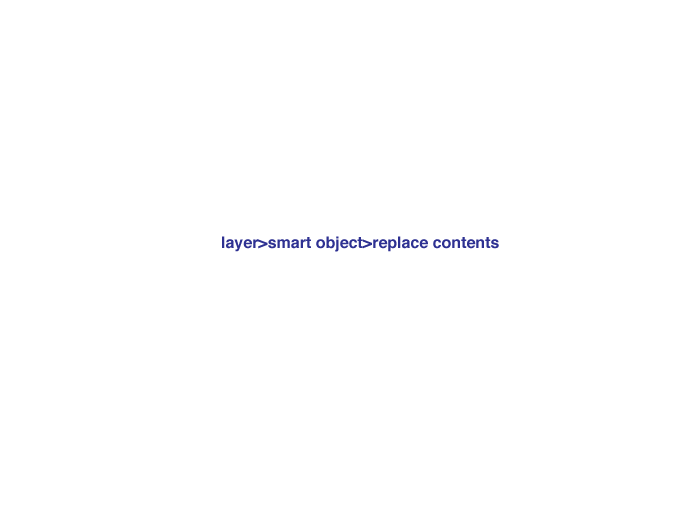
<style>
.page{position:relative;width:700px;height:525px;background:#ffffff}
.page>*{position:absolute;margin:0}
.t1{font:16px "Helvetica-Bold";color:#2e3192}
</style>
<div class="page">
<p class="t1" style="left:222px;top:236px;width:277px;height:16px">layer&gt;smart object&gt;replace contents</p>
</div>
